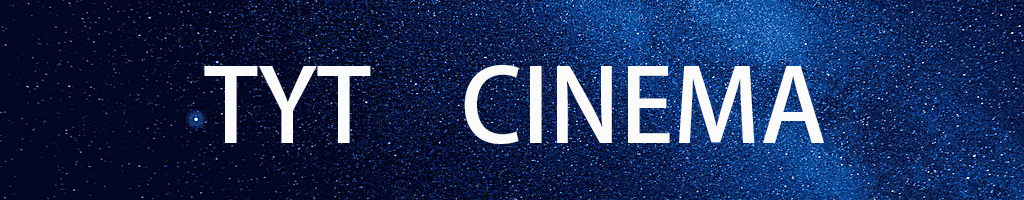
<style>
.page{position:relative;width:1024px;height:200px}
.page>*{position:absolute;margin:0}
.t1{font:100px "AdobeHeitiStd-Regular";color:#fbfbfb}
</style>
<div class="page">
<p class="t1" style="left:204px;top:65px;width:620px;height:79px">TYT    CINEMA</p>
</div>
